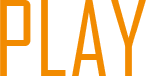
<style>
.page{position:relative;width:146px;height:76px;background:#ffffff}
.page>*{position:absolute;margin:0}
.t1{font:100px "AgencyFB-Reg";color:#f28b00}
</style>
<div class="page">
<p class="t1" style="left:0px;top:0px;width:146px;height:76px">PLAY</p>
</div>
